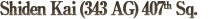
<style>
.page{position:relative;width:216px;height:19px;background:#ffffff}
.page>*{position:absolute;margin:0}
.t1{font:18px "RyuminPro-ExBold";letter-spacing:-0.08em;color:#4a3f32;font-weight:bold;scale:0.9 1}
</style>
<div class="page">
<p class="t1" style="left:0px;top:0px;width:198px;height:19px">Shiden Kai (343 AG) 407th Sq.</p>
</div>
